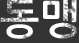
<style>
.page{position:relative;width:79px;height:43px;background:#333333}
.page>*{position:absolute;margin:0}
.t1{font:10.1px "NanumGothicBold"}
</style>
<div class="page">
<p class="t1" style="left:0px;top:0px;width:77px;height:39px;text-align:center">동맹</p>
</div>
